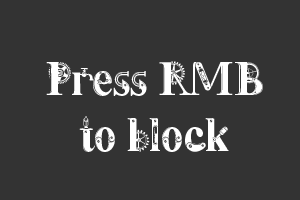
<style>
.page{position:relative;width:300px;height:200px;background:#333333}
.page>*{position:absolute;margin:0}
.t1{font:47px "Steamy";letter-spacing:-0.04em;color:#ffffff}
</style>
<div class="page">
<p class="t1" style="left:46px;top:61px;width:217px;height:91px;text-align:center">Press RMB<br>to block</p>
</div>
